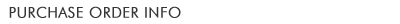
<style>
.page{position:relative;width:400px;height:24px;background:#ffffff}
.page>*{position:absolute;margin:0}
.t1{font:14.7px "FuturaBT-Light";letter-spacing:0.025em;color:#363636;text-transform:uppercase;font-weight:bold}
</style>
<div class="page">
<p class="t1" style="left:9px;top:6px;width:172px;height:12px">PURCHASE ORDER INFO</p>
</div>
